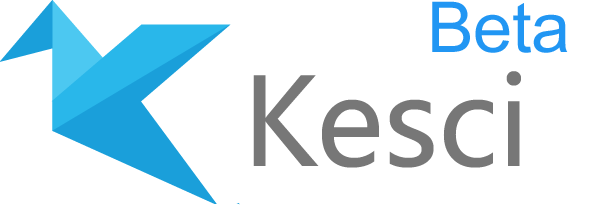
<style>
.page{position:relative;width:609px;height:206px;background:#ffffff}
.page>*{position:absolute;margin:0}
.t1{font:70px "ArialMT";letter-spacing:-0.005em;color:#2196f3}
.t2{font:120px "MicrosoftYaHei";letter-spacing:-0.005em;color:#777777}
</style>
<div class="page">
<p class="t1" style="left:432px;top:1px;width:136px;height:52px">Beta</p>
<p class="t2" style="left:253px;top:71px;width:268px;height:97px">Kesci</p>
</div>
